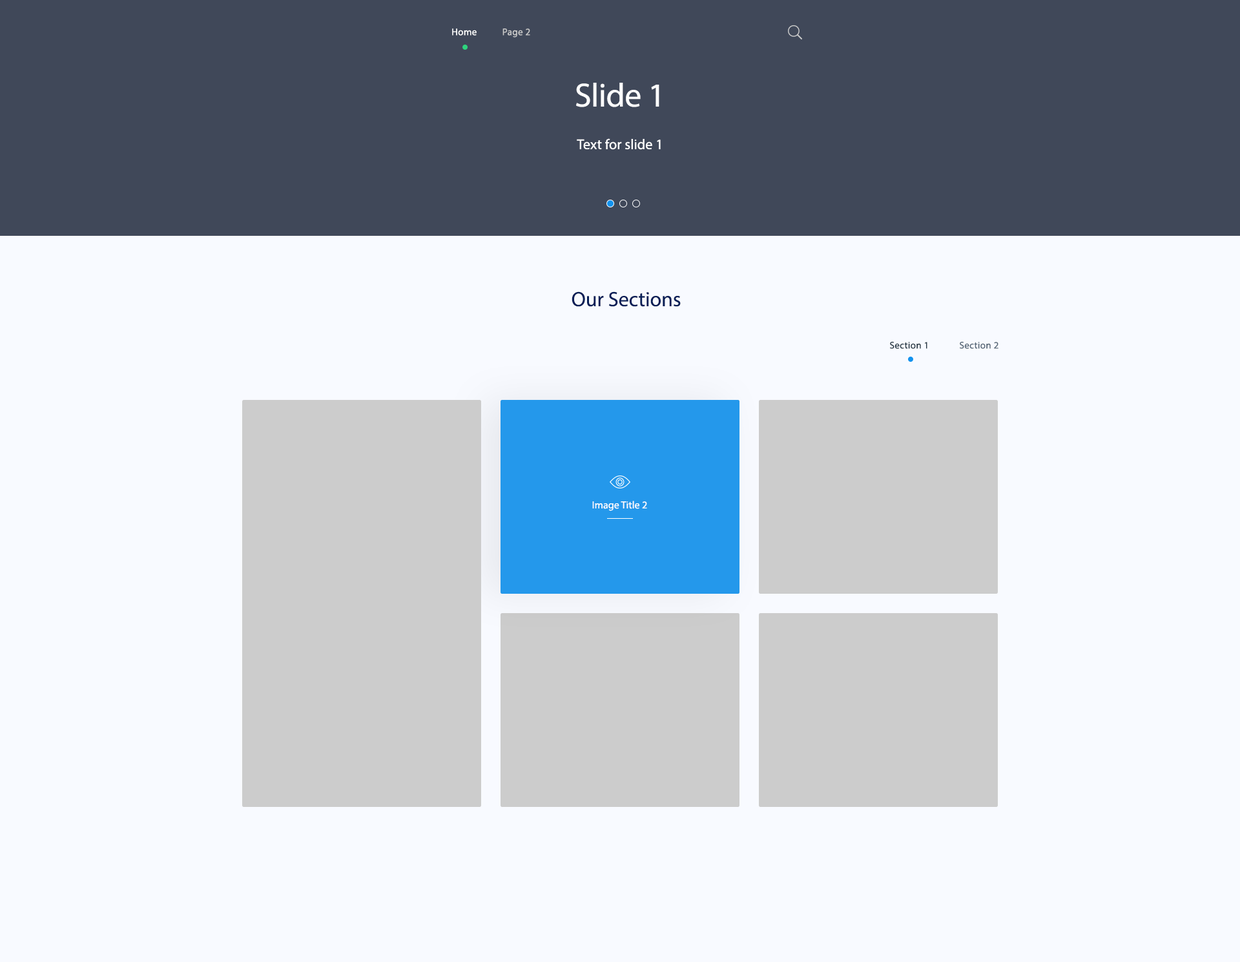
<style>
.page{position:relative;width:1240px;height:962px;background:#f8faff}
.page>*{position:absolute;margin:0}
.t1{font:9.7px "MyriadPro-Regular";letter-spacing:0.025em;color:#cacaca}
.t2{font:9.7px "MyriadPro-Regular";letter-spacing:0.025em;color:#ffffff}
.t3{font:33.6px "MyriadPro-Regular";letter-spacing:-0.01em;color:#ffffff}
.t4{font:14.2px "MyriadPro-Regular";letter-spacing:0.005em;color:#ffffff}
.t5{font:20.7px "MyriadPro-Regular";color:#071e57}
.t6{font:9.7px "MyriadPro-Regular";letter-spacing:0.025em;color:#253642}
.t7{font:9.7px "MyriadPro-Regular";letter-spacing:0.025em;color:#556575}
.t8{font:10.4px "MyriadPro-Regular";letter-spacing:0.005em;color:#fefefe}
</style>
<div class="page">
<p class="t1" style="left:452px;top:28px;width:78px;height:9px"><span class="t2">Home           </span>Page 2</p>
<p class="t3" style="left:576px;top:83px;width:83px;height:24px">Slide 1</p>
<p class="t4" style="left:577px;top:138px;width:84px;height:12px">Text for slide 1</p>
<p class="t5" style="left:572px;top:291px;width:109px;height:16px">Our Sections</p>
<p class="t6" style="left:890px;top:342px;width:108px;height:7px">Section 1  <span class="t7">Section 2</span></p>
<p class="t8" style="left:592px;top:501px;width:55px;height:10px">Image Title 2</p>
</div>
